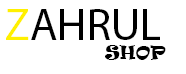
<style>
.page{position:relative;width:186px;height:74px;background:#ffffff}
.page>*{position:absolute;margin:0}
.t1{font:45px "MyriadPro-Regular";color:#000000}
.t2{font:45px "MyriadPro-Regular";color:#fff000}
.t3{font:18px "Ravie";color:#000000}
</style>
<div class="page">
<p class="t1" style="left:6px;top:9px;width:154px;height:31px"><span class="t2">Z</span>AHRUL</p>
<p class="t3" style="left:105px;top:45px;width:61px;height:15px">SHOP</p>
</div>
